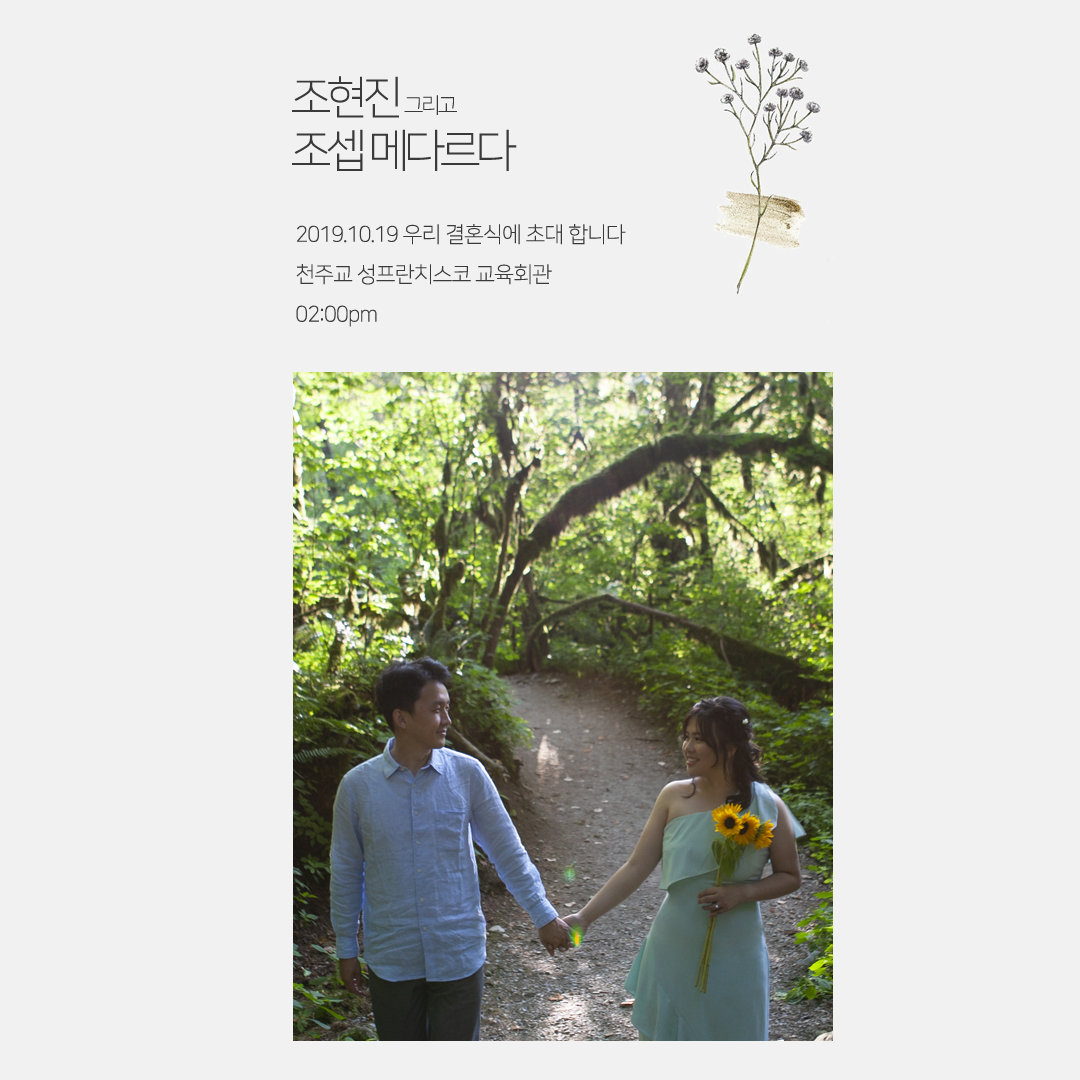
<style>
.page{position:relative;width:1080px;height:1080px;background:#f1f1f1}
.page>*{position:absolute;margin:0}
.t1{font:45.3px/53px "NanumSquareL";letter-spacing:-0.12em;color:#3a3a3a}
.t2{font:21.6px/53px "NanumSquareL";letter-spacing:-0.12em;color:#3a3a3a}
.t3{font:21.8px/40px "NanumSquareL";letter-spacing:-0.04em;color:#3a3a3a}
</style>
<div class="page">
<p class="t1" style="left:292px;top:76px;width:225px;height:95px">조현진 <span class="t2">그리고 <br></span>조셉 메다르다</p>
<p class="t3" style="left:296px;top:224px;width:330px;height:103px">2019.10.19 우리 결혼식에 초대 합니다<br>천주교 성프란치스코 교육회관<br>02:00pm</p>
</div>
